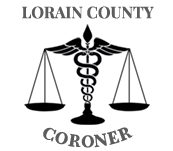
<style>
.page{position:relative;width:173px;height:151px;background:#ffffff}
.page>*{position:absolute;margin:0}
.t1{font:16px "PlayfairDisplay-Bold";color:#5c5c5c}
</style>
<div class="page">
<p class="t1" style="left:22px;top:6px;width:132px;height:13px">LORAIN COUNTY</p>
<p class="t1" style="left:43px;top:127px;width:90px;height:21px">CORONER</p>
</div>
